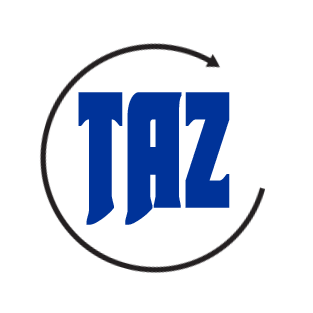
<style>
.page{position:relative;width:313px;height:313px;background:#ffffff}
.page>*{position:absolute;margin:0}
.t1{font:144.5px "UnionGray";color:#003399;font-weight:bold;scale:0.58 1}
</style>
<div class="page">
<p class="t1" style="left:78px;top:92px;width:152px;height:133px">TAZ</p>
</div>
